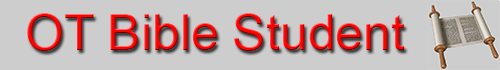
<style>
.page{position:relative;width:500px;height:70px;background:#cdcdcd}
.page>*{position:absolute;margin:0}
.t1{font:50px "ArialMT";color:#ff0000}
</style>
<div class="page">
<p class="t1" style="left:27px;top:13px;width:378px;height:38px">OT Bible Student</p>
</div>
